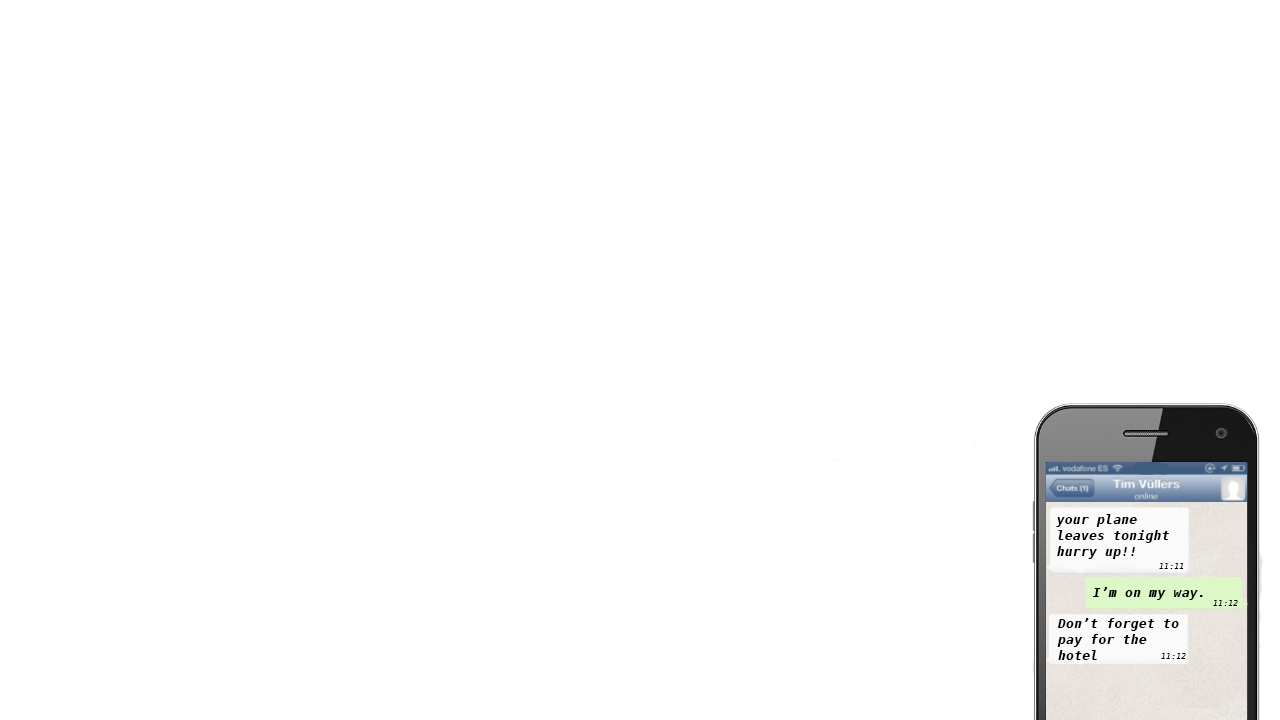
<style>
.page{position:relative;width:1280px;height:720px;background:#ffffff}
.page>*{position:absolute;margin:0}
.t1{font:13.4px "Menlo-BoldItalic";color:#000000}
.t2{font:8.4px "Menlo-Italic";color:#000000}
</style>
<div class="page">
<p class="t1" style="left:1056px;top:514px;width:113px;height:45px">your plane<br>leaves tonight<br>hurry up!!</p>
<p class="t2" style="left:1159px;top:563px;width:25px;height:6px">11:11</p>
<p class="t1" style="left:1093px;top:587px;width:110px;height:13px">I’m on my way.</p>
<p class="t2" style="left:1213px;top:600px;width:25px;height:6px">11:12</p>
<p class="t1" style="left:1057px;top:618px;width:122px;height:42px">Don’t forget to <br>pay for the <br>hotel</p>
<p class="t2" style="left:1161px;top:653px;width:25px;height:6px">11:12</p>
</div>
